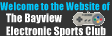
<style>
.page{position:relative;width:112px;height:36px;background:#333333}
.page>*{position:absolute;margin:0}
.t1{font:10px "Impact";color:#00c7fc}
.t2{font:11px "Impact";color:#ffffff}
</style>
<div class="page">
<p class="t1" style="left:0px;top:2px;width:110px;height:9px">Welcome to the Website of</p>
<p class="t2" style="left:6px;top:13px;width:100px;height:24px">The Bayview<br>Electronic Sports Club</p>
</div>
